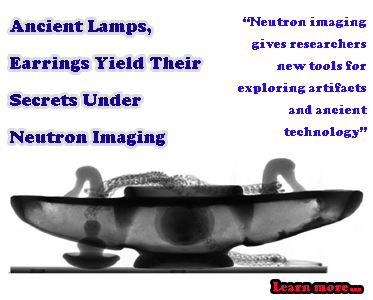
<style>
.page{position:relative;width:373px;height:300px;background:#ffffff}
.page>*{position:absolute;margin:0}
.t1{font:13px/22px "CooperBlack";color:#280cf4}
.t2{font:18px/37px "CooperBlack";color:#180792}
.t3{font:13px "CooperBlack";color:#fa0a2c}
</style>
<div class="page">
<p class="t1" style="left:238px;top:17px;width:129px;height:121px;text-align:right">“Neutron imaging<br>gives researchers<br>new tools for<br>exploring artifacts<br>and ancient<br>technology”</p>
<p class="t2" style="left:10px;top:20px;width:191px;height:126px">Ancient Lamps,<br>Earrings Yield Their<br>Secrets Under <br>Neutron Imaging</p>
<p class="t3" style="left:273px;top:282px;width:88px;height:9px">Learn more...</p>
</div>
